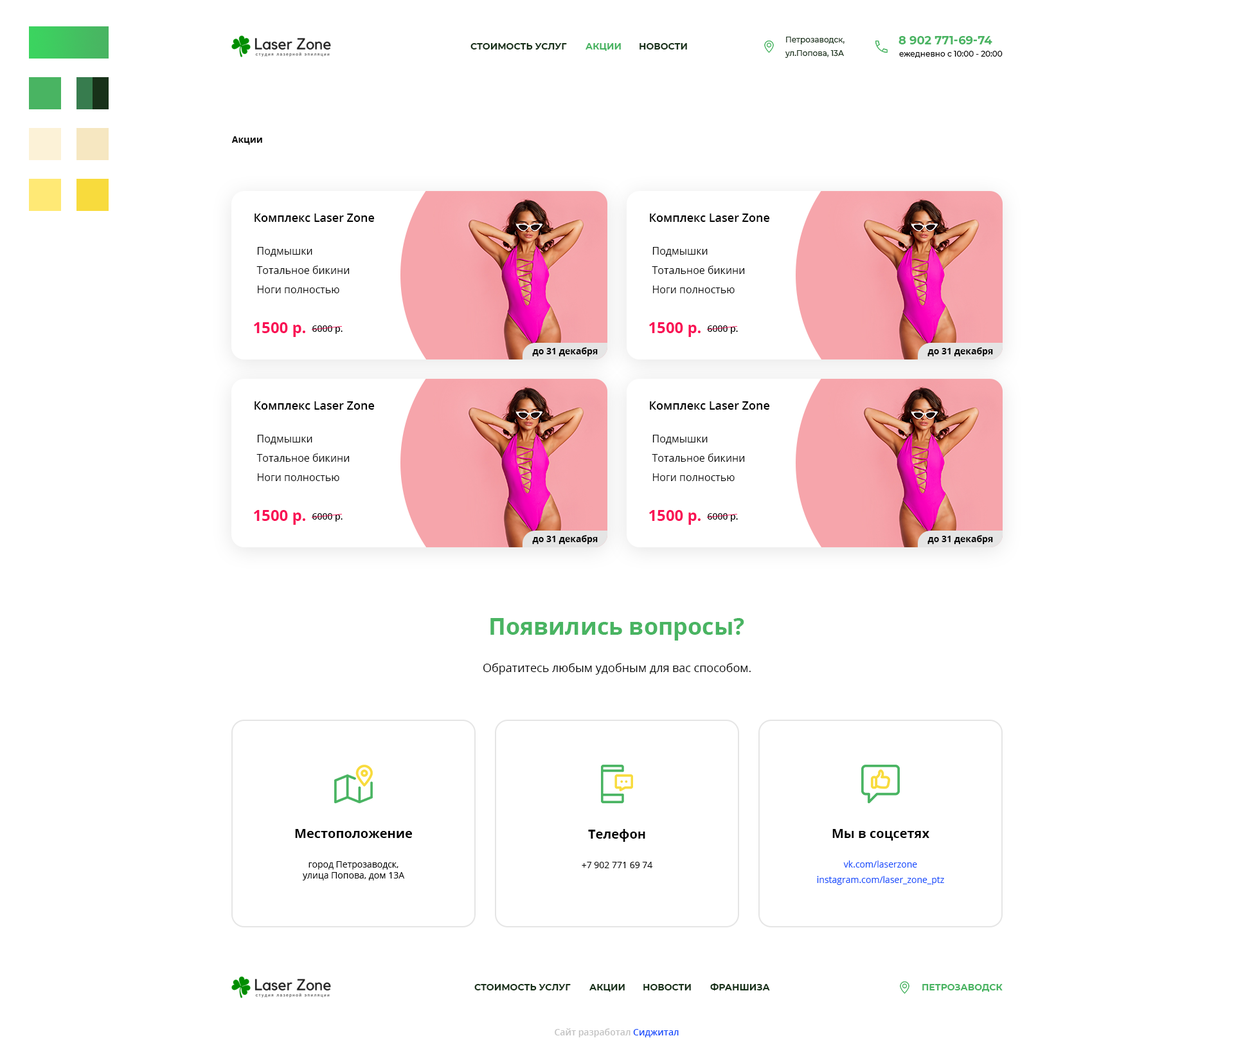
<style>
.page{position:relative;width:1234px;height:1047px;background:#ffffff}
.page>*{position:absolute;margin:0}
.t1{font:7.7px/13.5px "Montserrat-Medium";color:#183119}
.t2{font:11.6px "Montserrat-Bold";color:#49b462;text-transform:uppercase}
.t3{font:9px "Montserrat-Bold";color:#183119;text-transform:uppercase}
.t4{font:9px "Montserrat-Bold";color:#49b462;text-transform:uppercase}
.t5{font:7.7px "Montserrat-Medium";color:#000000}
.t6{font:9px "OpenSans-Bold";color:#000000}
.t7{font:11.6px "OpenSans-Semibold";color:#000000}
.t8{font:10.3px/19.3px "OpenSans";color:#000000}
.t9{font:15.4px "OpenSans-Bold";color:#f91155}
.t10{font:9px "OpenSans-Semibold";color:#000000}
.t11{font:23.1px "OpenSans-Bold";color:#49b462}
.t12{font:11.6px "OpenSans";color:#000000}
.t13{font:12.9px "OpenSans-Bold";color:#000000}
.t14{font:9px "OpenSans";color:#000000}
.t15{font:9px/15.4px "OpenSans";color:#184ffc}
.t16{font:9px "OpenSans-Semibold";color:#c2c2c2}
.t17{font:9px "OpenSans-Semibold";color:#184ffc}
</style>
<div class="page">
<p class="t1" style="left:785px;top:37px;width:60px;height:21px">Петрозаводск,<br>ул.Попова, 13А</p>
<p class="t2" style="left:899px;top:36px;width:94px;height:8px">8 902 771-69-74</p>
<p class="t3" style="left:471px;top:43px;width:96px;height:7px">Стоимость услуг</p>
<p class="t4" style="left:586px;top:43px;width:35px;height:8px">Акции</p>
<p class="t3" style="left:640px;top:43px;width:47px;height:7px">Новости</p>
<p class="t5" style="left:899px;top:51px;width:104px;height:7px">ежедневно с 10:00 - 20:00</p>
<p class="t6" style="left:231px;top:136px;width:31px;height:9px">Акции</p>
<p class="t7" style="left:255px;top:213px;width:120px;height:9px">Комплекс Laser Zone</p>
<p class="t7" style="left:650px;top:213px;width:120px;height:9px">Комплекс Laser Zone</p>
<p class="t8" style="left:256px;top:247px;width:94px;height:46px">Подмышки<br>Тотальное бикини<br>Ноги полностью</p>
<p class="t8" style="left:652px;top:247px;width:93px;height:46px">Подмышки<br>Тотальное бикини<br>Ноги полностью</p>
<p class="t9" style="left:254px;top:322px;width:51px;height:15px">1500 р.</p>
<p class="t10" style="left:312px;top:325px;width:31px;height:9px">6000 р.</p>
<p class="t9" style="left:649px;top:322px;width:52px;height:15px">1500 р.</p>
<p class="t10" style="left:708px;top:325px;width:30px;height:9px">6000 р.</p>
<p class="t6" style="left:532px;top:347px;width:66px;height:9px">до 31 декабря</p>
<p class="t6" style="left:928px;top:347px;width:65px;height:9px">до 31 декабря</p>
<p class="t7" style="left:255px;top:401px;width:120px;height:9px">Комплекс Laser Zone</p>
<p class="t7" style="left:650px;top:401px;width:120px;height:9px">Комплекс Laser Zone</p>
<p class="t8" style="left:256px;top:435px;width:94px;height:46px">Подмышки<br>Тотальное бикини<br>Ноги полностью</p>
<p class="t8" style="left:652px;top:435px;width:93px;height:46px">Подмышки<br>Тотальное бикини<br>Ноги полностью</p>
<p class="t9" style="left:254px;top:510px;width:51px;height:15px">1500 р.</p>
<p class="t9" style="left:649px;top:510px;width:52px;height:15px">1500 р.</p>
<p class="t10" style="left:312px;top:513px;width:31px;height:8px">6000 р.</p>
<p class="t10" style="left:708px;top:513px;width:30px;height:8px">6000 р.</p>
<p class="t6" style="left:532px;top:535px;width:66px;height:9px">до 31 декабря</p>
<p class="t6" style="left:928px;top:535px;width:65px;height:9px">до 31 декабря</p>
<p class="t11" style="left:491px;top:618px;width:253px;height:22px">Появились вопросы?</p>
<p class="t12" style="left:483px;top:663px;width:268px;height:11px">Обратитесь любым удобным для вас способом.</p>
<p class="t13" style="left:295px;top:829px;width:117px;height:9px">Местоположение</p>
<p class="t13" style="left:588px;top:829px;width:57px;height:13px">Телефон</p>
<p class="t13" style="left:833px;top:829px;width:97px;height:11px">Мы в соцсетях</p>
<p class="t14" style="left:303px;top:861px;width:102px;height:19px;text-align:center">город Петрозаводск,<br>улица Попова, дом 13А</p>
<p class="t14" style="left:582px;top:861px;width:71px;height:7px">+7 902 771 69 74</p>
<p class="t15" style="left:817px;top:860px;width:127px;height:25px;text-align:center">vk.com/laserzone<br>instagram.com/laser_zone_ptz</p>
<p class="t3" style="left:474px;top:984px;width:97px;height:6px">Стоимость услуг</p>
<p class="t3" style="left:590px;top:984px;width:35px;height:7px">Акции</p>
<p class="t3" style="left:644px;top:984px;width:47px;height:6px">Новости</p>
<p class="t3" style="left:710px;top:983px;width:60px;height:7px">Франшиза</p>
<p class="t4" style="left:923px;top:984px;width:80px;height:7px">Петрозаводск</p>
<p class="t16" style="left:555px;top:1028px;width:124px;height:9px">Сайт разработал <span class="t17">Сиджитал</span></p>
</div>
